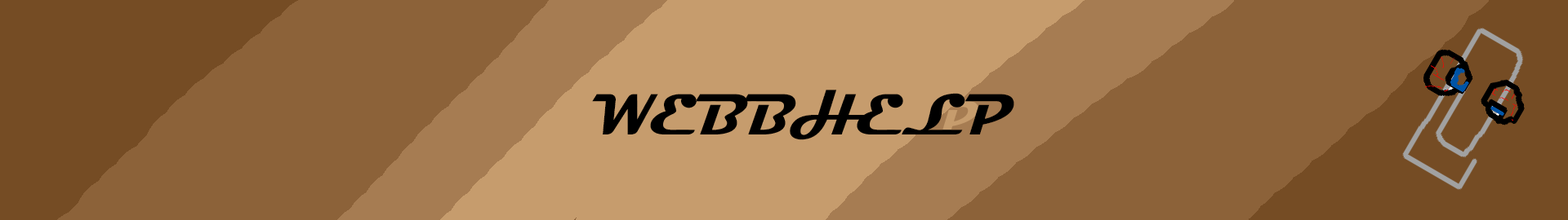
<style>
.page{position:relative;width:1568px;height:220px;background:#8c6239}
.page>*{position:absolute;margin:0}
.t1{font:49px "Magneto-Bold";color:#c69c6d}
.t2{font:58.8px/0px "Magneto-Bold";color:#000000}
</style>
<div class="page">
<p class="t1" style="left:592px;top:90px;width:422px;height:50px;text-align:center">WEBBHELP<span class="t2"><br>WEBBHELP</span></p>
</div>
